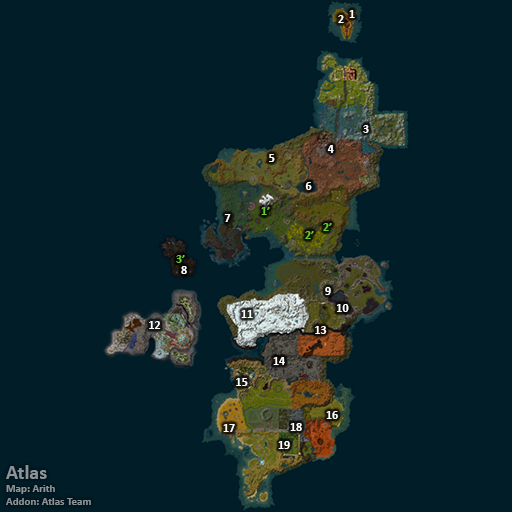
<style>
.page{position:relative;width:512px;height:512px;background:#001d28}
.page>*{position:absolute;margin:0}
.t1{font:12px "Calibri-Bold";color:#ffffff}
.t2{font:12px "Calibri-Bold";color:#66cc33}
.t3{font:11px "Calibri-Bold";color:#8d9396}
.t4{font:20px "Calibri-Bold";color:#8d9396}
</style>
<div class="page">
<p class="t1" style="left:338px;top:15px;width:6px;height:8px">2</p>
<p class="t1" style="left:349px;top:10px;width:6px;height:8px">1</p>
<p class="t1" style="left:363px;top:125px;width:6px;height:8px">3</p>
<p class="t1" style="left:327px;top:145px;width:7px;height:8px">4</p>
<p class="t1" style="left:269px;top:154px;width:6px;height:8px">5</p>
<p class="t1" style="left:305px;top:182px;width:7px;height:8px">6</p>
<p class="t2" style="left:261px;top:207px;width:9px;height:8px">1’</p>
<p class="t1" style="left:224px;top:214px;width:7px;height:8px">7</p>
<p class="t2" style="left:305px;top:231px;width:9px;height:8px">2’</p>
<p class="t2" style="left:323px;top:223px;width:9px;height:8px">2’</p>
<p class="t2" style="left:176px;top:255px;width:9px;height:8px">3’</p>
<p class="t1" style="left:181px;top:266px;width:6px;height:8px">8</p>
<p class="t1" style="left:325px;top:287px;width:6px;height:8px">9</p>
<p class="t1" style="left:337px;top:304px;width:12px;height:8px">10</p>
<p class="t1" style="left:241px;top:310px;width:12px;height:8px">11</p>
<p class="t1" style="left:149px;top:321px;width:12px;height:8px">12</p>
<p class="t1" style="left:315px;top:326px;width:12px;height:8px">13</p>
<p class="t1" style="left:273px;top:357px;width:12px;height:8px">14</p>
<p class="t1" style="left:236px;top:378px;width:12px;height:8px">15</p>
<p class="t1" style="left:326px;top:411px;width:12px;height:8px">16</p>
<p class="t1" style="left:223px;top:424px;width:12px;height:8px">17</p>
<p class="t1" style="left:290px;top:423px;width:12px;height:8px">18</p>
<p class="t1" style="left:278px;top:441px;width:12px;height:8px">19</p>
<p class="t3" style="left:6px;top:465px;width:85px;height:40px"><span class="t4">Atlas<br></span>Map: Arith<br>Addon: Atlas Team</p>
</div>
